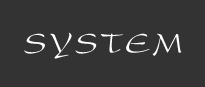
<style>
.page{position:relative;width:205px;height:87px;background:#333333}
.page>*{position:absolute;margin:0}
.t1{font:30px "FZGLJW--GB1-0";letter-spacing:0.12em;color:#ffffff;text-transform:uppercase}
</style>
<div class="page">
<p class="t1" style="left:24px;top:32px;width:158px;height:27px">system</p>
</div>
